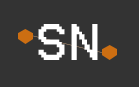
<style>
.page{position:relative;width:139px;height:87px;background:#333333}
.page>*{position:absolute;margin:0}
.t1{font:41.1px "Terminal";letter-spacing:0.05em;color:#fefefe}
</style>
<div class="page">
<p class="t1" style="left:38px;top:24px;width:60px;height:36px">SN</p>
</div>
